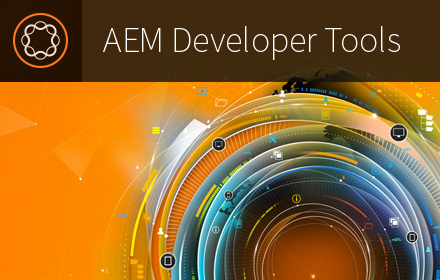
<style>
.page{position:relative;width:440px;height:280px}
.page>*{position:absolute;margin:0}
.t1{font:35.7px "SourceSansPro-ExtraLight";color:#ffffff}
</style>
<div class="page">
<p class="t1" style="left:103px;top:26px;width:297px;height:34px">AEM Developer Tools</p>
</div>
